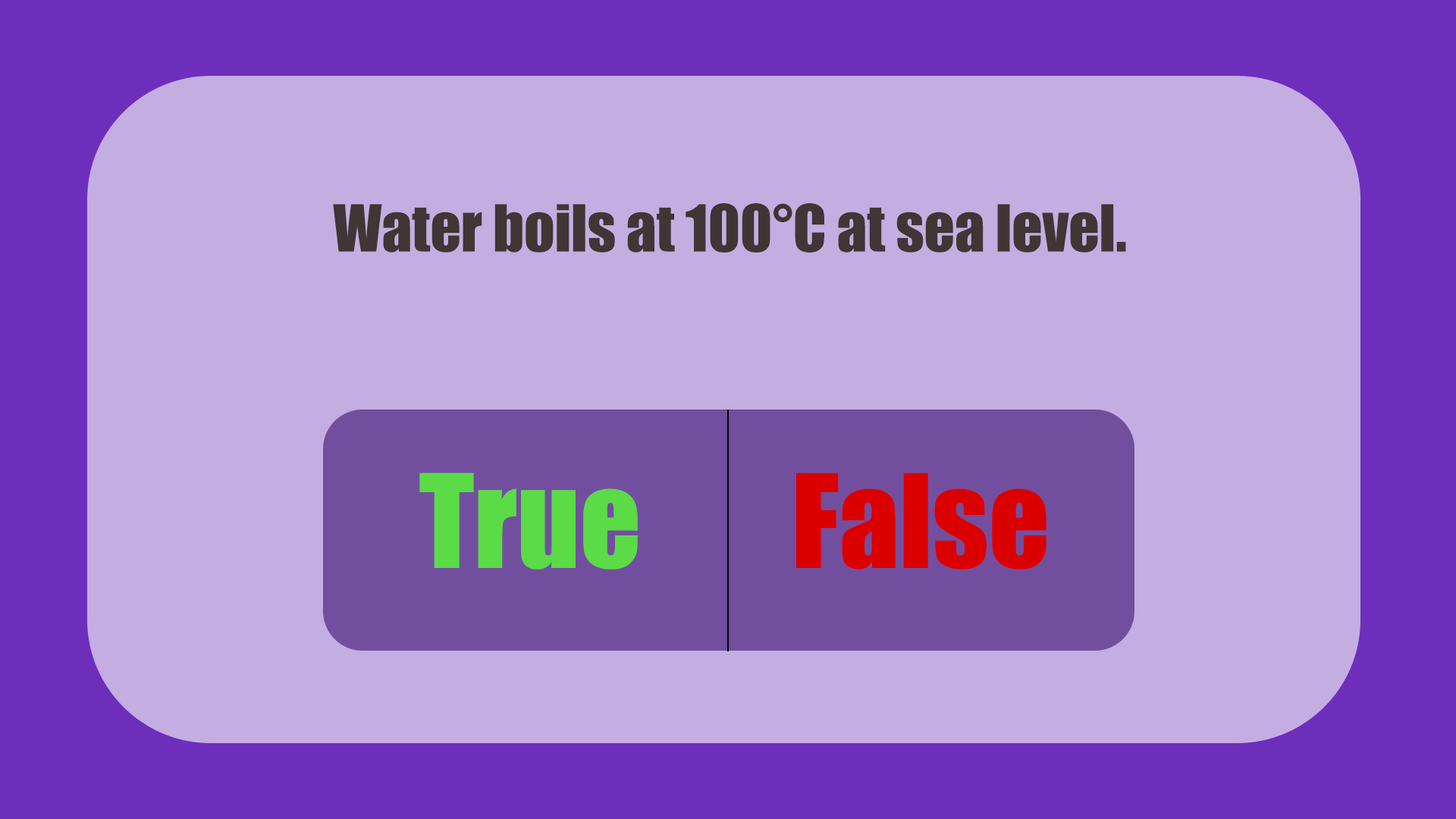
<style>
.page{position:relative;width:1456px;height:819px;background:#c4ade1}
.page>*{position:absolute;margin:0}
.t1{font:59.9px "Impact";color:#413535}
.t2{font:119.8px "Impact";color:#5bdb46}
.t3{font:119.8px "Impact";color:#da0000}
</style>
<div class="page">
<p class="t1" style="left:333px;top:203px;width:793px;height:50px">Water boils at 100°C at sea level.</p>
<p class="t2" style="left:419px;top:472px;width:219px;height:98px">True</p>
<p class="t3" style="left:796px;top:472px;width:250px;height:98px">False</p>
</div>
